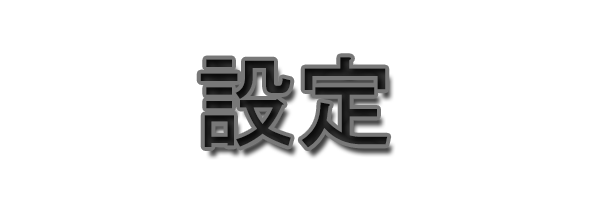
<style>
.page{position:relative;width:600px;height:200px;background:#ffffff}
.page>*{position:absolute;margin:0}
.t1{font:100px "MS-Gothic";color:#191919}
</style>
<div class="page">
<p class="t1" style="left:200px;top:57px;width:188px;height:91px">設定</p>
</div>
